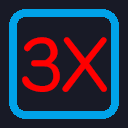
<style>
.page{position:relative;width:128px;height:128px;background:#181a26}
.page>*{position:absolute;margin:0}
.t1{font:80px "©M¥­²Ê¶ê";color:#ff0000}
</style>
<div class="page">
<p class="t1" style="left:22px;top:37px;width:85px;height:55px">3X</p>
</div>
